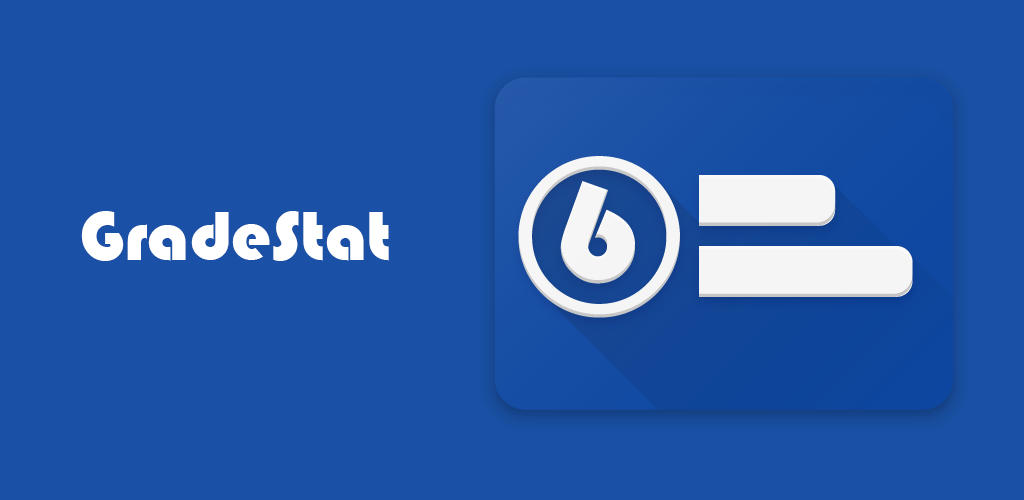
<style>
.page{position:relative;width:1024px;height:500px;background:#1a51a6}
.page>*{position:absolute;margin:0}
.t1{font:72px "Bauhaus93";color:#ffffff}
</style>
<div class="page">
<p class="t1" style="left:81px;top:211px;width:308px;height:50px">GradeStat</p>
</div>
